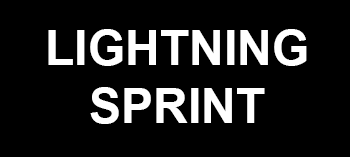
<style>
.page{position:relative;width:350px;height:157px;background:#000000}
.page>*{position:absolute;margin:0}
.t1{font:48px "Arial-BoldMT";color:#ffffff}
</style>
<div class="page">
<p class="t1" style="left:48px;top:29px;width:259px;height:95px;text-align:center">LIGHTNING<br>SPRINT</p>
</div>
